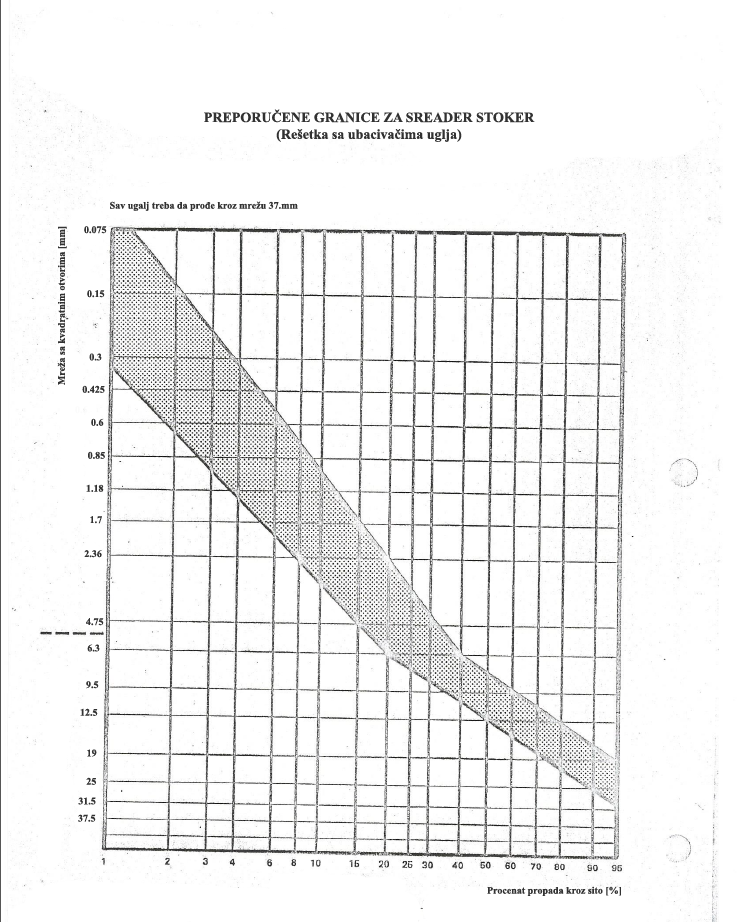
<style>
.page{position:relative;width:747px;height:922px;background:#ffffff}
.page>*{position:absolute;margin:0}
.t1{font:14px "TimesNewRomanPS-BoldMT";color:#323232}
.t2{font:10px "TimesNewRomanPS-BoldMT";color:#323232}
.t3{font:10px "TimesNewRomanPS-BoldMT";color:#fbfbfb}
</style>
<div class="page">
<p class="t1" style="left:204px;top:109px;width:331px;height:33px;text-align:center">PREPORUČENE GRANICE ZA SREADER STOKER<br>(Rešetka sa ubacivačima uglja)</p>
<p class="t2" style="left:110px;top:201px;width:188px;height:10px">Sav ugalj treba da prođe kroz mrežu 37.mm</p>
<p class="t2" style="left:57px;top:226px;width:10px;height:159px;rotate:-90deg">Mreža sa kvadratnim otvorima [mm]</p>
<p class="t2" style="left:84px;top:226px;width:23px;height:8px">0.075</p>
<p class="t2" style="left:87px;top:290px;width:18px;height:8px">0.15</p>
<p class="t2" style="left:89px;top:353px;width:13px;height:8px">0.3</p>
<p class="t2" style="left:82px;top:385px;width:23px;height:8px">0.425</p>
<p class="t3" style="left:75px;top:406px;width:13px;height:8px">0.6</p>
<p class="t2" style="left:91px;top:418px;width:13px;height:8px">0.6</p>
<p class="t2" style="left:88px;top:451px;width:17px;height:8px">0.85</p>
<p class="t2" style="left:86px;top:484px;width:18px;height:8px">1.18</p>
<p class="t2" style="left:90px;top:516px;width:12px;height:8px">1.7</p>
<p class="t2" style="left:84px;top:550px;width:18px;height:8px">2.36</p>
<p class="t2" style="left:86px;top:618px;width:18px;height:8px">4.75</p>
<p class="t2" style="left:87px;top:644px;width:13px;height:8px">6.3</p>
<p class="t2" style="left:86px;top:681px;width:13px;height:8px">9.5</p>
<p class="t2" style="left:80px;top:708px;width:18px;height:8px">12.5</p>
<p class="t2" style="left:87px;top:749px;width:10px;height:8px">19</p>
<p class="t2" style="left:86px;top:777px;width:10px;height:8px">25</p>
<p class="t2" style="left:78px;top:797px;width:18px;height:8px">31.5</p>
<p class="t2" style="left:78px;top:814px;width:18px;height:8px">37.5</p>
<p class="t2" style="left:487px;top:886px;width:134px;height:10px">Procenat propada kroz sito [%]</p>
</div>
